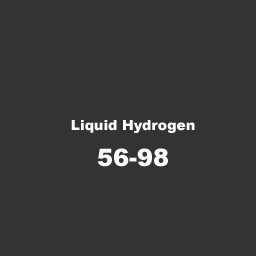
<style>
.page{position:relative;width:256px;height:256px;background:#333333}
.page>*{position:absolute;margin:0}
.t1{font:14px "Arial-Black";color:#fcfcfc}
.t2{font:24px "Arial-Black";color:#fbfbfb}
</style>
<div class="page">
<p class="t1" style="left:71px;top:120px;width:124px;height:13px">Liquid Hydrogen</p>
<p class="t2" style="left:97px;top:148px;width:71px;height:19px">56-98</p>
</div>
